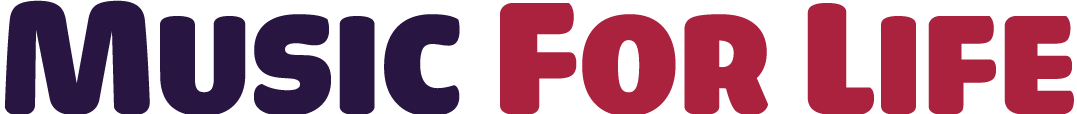
<style>
.page{position:relative;width:1077px;height:114px;background:#ffffff}
.page>*{position:absolute;margin:0}
.t1{font:150px "iCielCadena";color:#281542;text-transform:uppercase}
.t2{font:170px "iCielCadena";color:#281542;text-transform:uppercase}
.t3{font:170px "iCielCadena";color:#ab223f;text-transform:uppercase}
.t4{font:150px "iCielCadena";color:#ab223f;text-transform:uppercase}
</style>
<div class="page">
<p class="t1" style="left:4px;top:0px;width:1070px;height:114px"><span class="t2">m</span>usic <span class="t3">f</span><span class="t4">or </span><span class="t3">l</span><span class="t4">ife</span></p>
</div>
